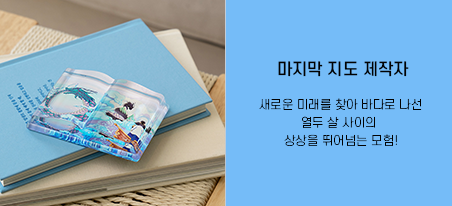
<style>
.page{position:relative;width:452px;height:206px;background:#75bcf8}
.page>*{position:absolute;margin:0}
.t1{font:16px "S-CoreDream-5Medium"}
.t2{font:16px "S-CoreDream-5Medium";color:#010101}
.t3{font:12px/18px "S-CoreDream-2ExtraLight";color:#010101}
</style>
<div class="page">
<p class="t1" style="left:278px;top:61px;width:129px;height:16px">슬픔에 이름 붙이기</p>
<p class="t2" style="left:278px;top:61px;width:131px;height:16px">마지막 지도 제작자</p>
<p class="t3" style="left:259px;top:98px;width:163px;height:48px;text-align:center">새로운 미래를 찾아 바다로 나선<br>열두 살 사이의 <br>상상을 뛰어넘는 모험!</p>
</div>
